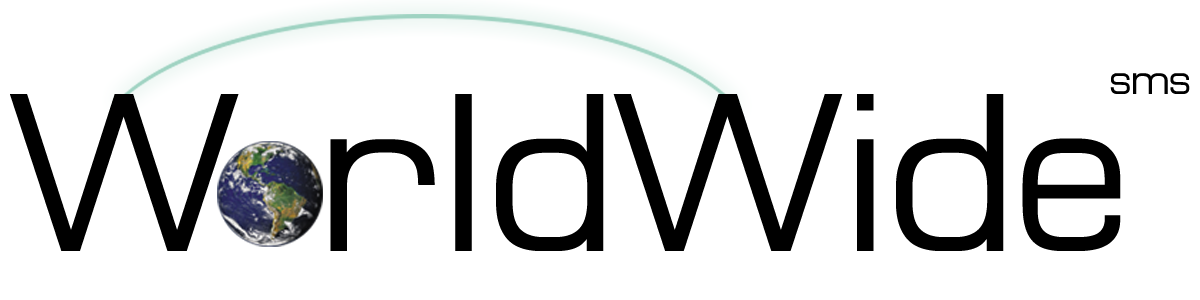
<style>
.page{position:relative;width:1200px;height:300px;background:#ffffff}
.page>*{position:absolute;margin:0}
.t1{font:41.6px "MicroFLF";letter-spacing:-0.02em;color:#000000}
.t2{font:226.1px "MicroFLF";letter-spacing:-0.02em;color:#000000}
</style>
<div class="page">
<p class="t1" style="left:1110px;top:73px;width:80px;height:21px">sms</p>
<p class="t2" style="left:10px;top:94px;width:1111px;height:157px">W rldWide</p>
</div>
